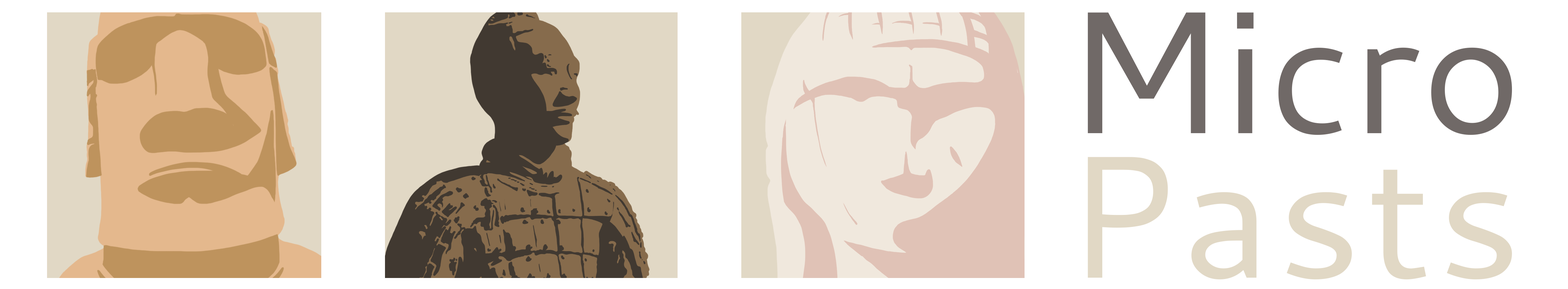
<style>
.page{position:relative;width:1568px;height:289px;background:#ffffff}
.page>*{position:absolute;margin:0}
.t1{font:173.8px/144.6px "Cantarell-Regular";color:#706967}
.t2{font:173.8px/144.6px "Cantarell-Regular";letter-spacing:0.024em;color:#e1d8c5}
</style>
<div class="page">
<p class="t1" style="left:1088px;top:12px;width:424px;height:268px">Micro<br><span class="t2">Pasts</span></p>
</div>
